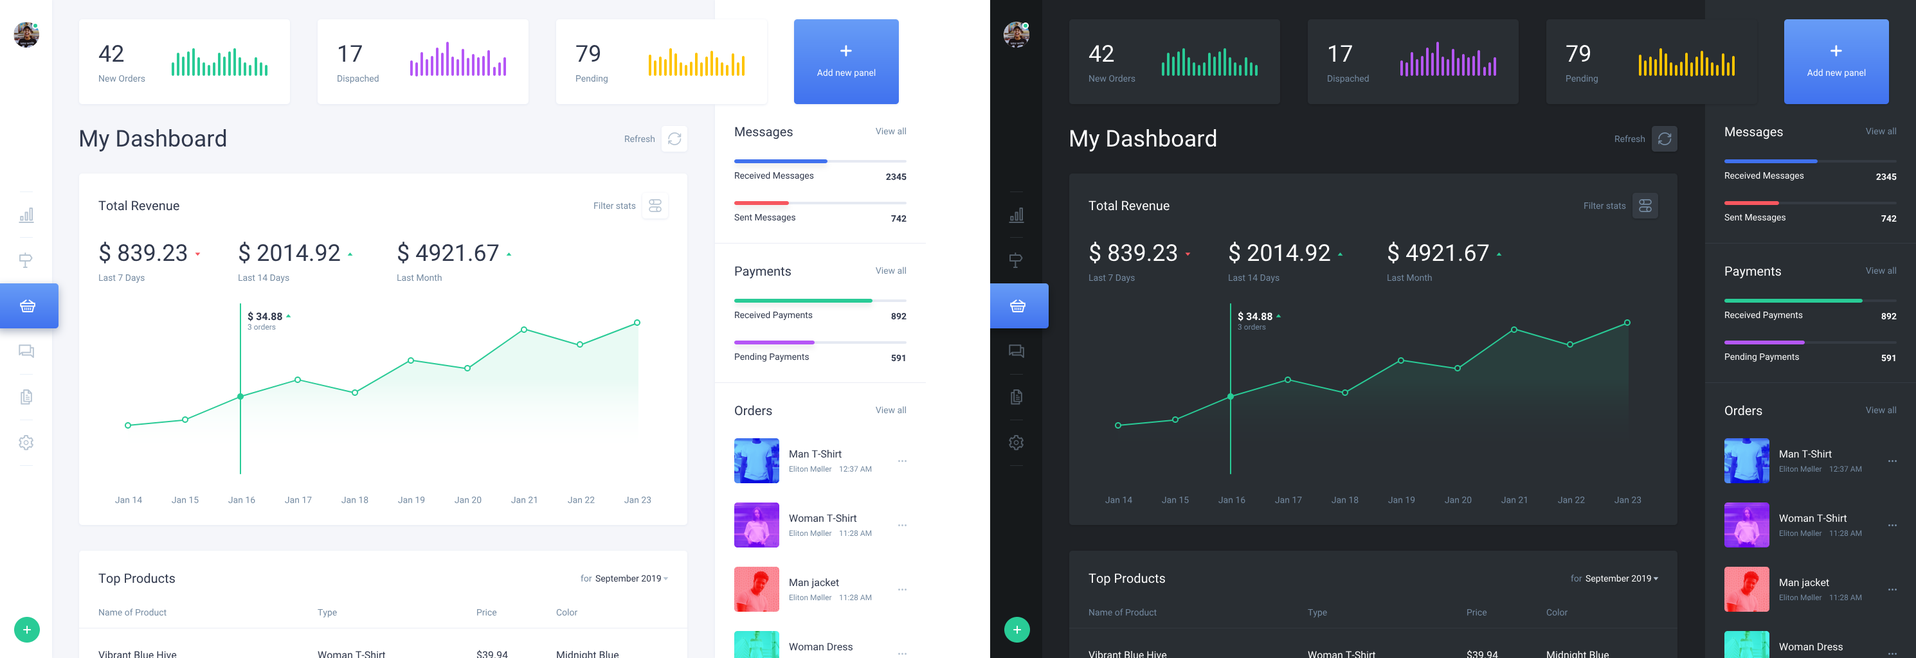
<style>
.page{position:relative;width:1916px;height:658px;background:#ffffff}
.page>*{position:absolute;margin:0}
.t1{font:23.1px "Roboto-Regular";color:#31394d}
.t2{font:23.1px "Roboto-Regular";color:#ffffff}
.t3{font:9px "Roboto-Regular";color:#748aa1}
.t4{font:9px "Roboto-Regular";color:#ffffff}
.t5{font:12.9px "Roboto-Regular";color:#31394d}
.t6{font:12.9px "Roboto-Regular";color:#ffffff}
.t7{font:9px "Roboto-Regular";color:#31394d}
.t8{font:9px "Roboto-Bold";color:#31394d}
.t9{font:9px "Roboto-Bold";color:#ffffff}
.t10{font:10.3px "Roboto-Bold";color:#31394d}
.t11{font:10.3px "Roboto-Bold";color:#ffffff}
.t12{font:7.7px "Roboto-Regular";color:#748aa1}
.t13{font:10.3px "Roboto-Regular";color:#31394d}
.t14{font:10.3px "Roboto-Regular";color:#ffffff}
</style>
<div class="page">
<p class="t1" style="left:98px;top:45px;width:26px;height:17px">42</p>
<p class="t1" style="left:338px;top:45px;width:24px;height:17px">17</p>
<p class="t1" style="left:576px;top:45px;width:24px;height:17px">79</p>
<p class="t2" style="left:1088px;top:45px;width:26px;height:17px">42</p>
<p class="t2" style="left:1328px;top:45px;width:24px;height:17px">17</p>
<p class="t2" style="left:1566px;top:45px;width:24px;height:17px">79</p>
<p class="t3" style="left:99px;top:75px;width:46px;height:7px">New Orders</p>
<p class="t3" style="left:338px;top:75px;width:41px;height:9px">Dispached</p>
<p class="t3" style="left:576px;top:75px;width:32px;height:9px">Pending</p>
<p class="t4" style="left:816px;top:69px;width:60px;height:9px">Add new panel</p>
<p class="t3" style="left:1089px;top:75px;width:46px;height:7px">New Orders</p>
<p class="t3" style="left:1328px;top:75px;width:41px;height:9px">Dispached</p>
<p class="t3" style="left:1566px;top:75px;width:32px;height:9px">Pending</p>
<p class="t4" style="left:1806px;top:69px;width:60px;height:9px">Add new panel</p>
<p class="t1" style="left:80px;top:129px;width:146px;height:23px">My Dashboard</p>
<p class="t3" style="left:625px;top:135px;width:30px;height:8px">Refresh</p>
<p class="t5" style="left:735px;top:127px;width:58px;height:13px">Messages</p>
<p class="t3" style="left:876px;top:127px;width:30px;height:8px">View all</p>
<p class="t2" style="left:1070px;top:129px;width:146px;height:23px">My Dashboard</p>
<p class="t3" style="left:1615px;top:135px;width:30px;height:8px">Refresh</p>
<p class="t6" style="left:1725px;top:127px;width:58px;height:13px">Messages</p>
<p class="t3" style="left:1866px;top:127px;width:30px;height:8px">View all</p>
<p class="t7" style="left:735px;top:172px;width:79px;height:9px">Received Messages</p>
<p class="t8" style="left:886px;top:173px;width:20px;height:8px">2345</p>
<p class="t4" style="left:1725px;top:172px;width:79px;height:9px">Received Messages</p>
<p class="t9" style="left:1876px;top:173px;width:20px;height:8px">2345</p>
<p class="t5" style="left:98px;top:201px;width:81px;height:10px">Total Revenue</p>
<p class="t3" style="left:594px;top:202px;width:42px;height:8px">Filter stats</p>
<p class="t6" style="left:1088px;top:201px;width:81px;height:10px">Total Revenue</p>
<p class="t3" style="left:1584px;top:202px;width:42px;height:8px">Filter stats</p>
<p class="t7" style="left:734px;top:213px;width:61px;height:9px">Sent Messages</p>
<p class="t8" style="left:891px;top:215px;width:15px;height:7px">742</p>
<p class="t4" style="left:1724px;top:213px;width:61px;height:9px">Sent Messages</p>
<p class="t9" style="left:1881px;top:215px;width:15px;height:7px">742</p>
<p class="t1" style="left:99px;top:242px;width:88px;height:22px">$ 839.23</p>
<p class="t1" style="left:239px;top:242px;width:101px;height:22px">$ 2014.92</p>
<p class="t1" style="left:397px;top:242px;width:102px;height:22px">$ 4921.67</p>
<p class="t2" style="left:1089px;top:242px;width:88px;height:22px">$ 839.23</p>
<p class="t2" style="left:1228px;top:242px;width:102px;height:22px">$ 2014.92</p>
<p class="t2" style="left:1387px;top:242px;width:102px;height:22px">$ 4921.67</p>
<p class="t5" style="left:735px;top:266px;width:56px;height:13px">Payments</p>
<p class="t3" style="left:876px;top:267px;width:30px;height:7px">View all</p>
<p class="t6" style="left:1725px;top:266px;width:56px;height:13px">Payments</p>
<p class="t3" style="left:1866px;top:267px;width:30px;height:7px">View all</p>
<p class="t3" style="left:99px;top:274px;width:46px;height:9px">Last 7 Days</p>
<p class="t3" style="left:239px;top:274px;width:50px;height:9px">Last 14 Days</p>
<p class="t3" style="left:397px;top:274px;width:45px;height:8px">Last Month</p>
<p class="t3" style="left:1089px;top:274px;width:46px;height:9px">Last 7 Days</p>
<p class="t3" style="left:1228px;top:274px;width:51px;height:9px">Last 14 Days</p>
<p class="t3" style="left:1387px;top:274px;width:45px;height:8px">Last Month</p>
<p class="t10" style="left:248px;top:311px;width:34px;height:10px">$ 34.88</p>
<p class="t7" style="left:735px;top:311px;width:78px;height:9px">Received Payments</p>
<p class="t8" style="left:891px;top:312px;width:15px;height:8px">892</p>
<p class="t11" style="left:1238px;top:311px;width:34px;height:10px">$ 34.88</p>
<p class="t4" style="left:1725px;top:311px;width:78px;height:9px">Received Payments</p>
<p class="t9" style="left:1881px;top:312px;width:15px;height:8px">892</p>
<p class="t12" style="left:248px;top:324px;width:28px;height:6px">3 orders</p>
<p class="t12" style="left:1238px;top:324px;width:28px;height:6px">3 orders</p>
<p class="t7" style="left:735px;top:353px;width:74px;height:9px">Pending Payments</p>
<p class="t4" style="left:1725px;top:353px;width:74px;height:9px">Pending Payments</p>
<p class="t8" style="left:891px;top:354px;width:14px;height:8px">591</p>
<p class="t9" style="left:1881px;top:354px;width:14px;height:8px">591</p>
<p class="t5" style="left:735px;top:406px;width:37px;height:10px">Orders</p>
<p class="t3" style="left:876px;top:406px;width:30px;height:8px">View all</p>
<p class="t6" style="left:1725px;top:406px;width:37px;height:10px">Orders</p>
<p class="t3" style="left:1866px;top:406px;width:30px;height:8px">View all</p>
<p class="t13" style="left:789px;top:450px;width:53px;height:8px">Man T-Shirt</p>
<p class="t14" style="left:1779px;top:450px;width:53px;height:8px">Man T-Shirt</p>
<p class="t12" style="left:789px;top:466px;width:43px;height:7px">Eliton Møller</p>
<p class="t12" style="left:839px;top:466px;width:33px;height:7px">12:37 AM</p>
<p class="t12" style="left:1779px;top:466px;width:43px;height:7px">Eliton Møller</p>
<p class="t12" style="left:1829px;top:466px;width:33px;height:7px">12:37 AM</p>
<p class="t3" style="left:115px;top:496px;width:27px;height:7px">Jan 14</p>
<p class="t3" style="left:172px;top:496px;width:27px;height:7px">Jan 15</p>
<p class="t3" style="left:228px;top:496px;width:27px;height:7px">Jan 16</p>
<p class="t3" style="left:285px;top:496px;width:27px;height:7px">Jan 17</p>
<p class="t3" style="left:341px;top:496px;width:27px;height:7px">Jan 18</p>
<p class="t3" style="left:398px;top:496px;width:27px;height:7px">Jan 19</p>
<p class="t3" style="left:455px;top:496px;width:27px;height:7px">Jan 20</p>
<p class="t3" style="left:511px;top:496px;width:26px;height:7px">Jan 21</p>
<p class="t3" style="left:568px;top:496px;width:27px;height:7px">Jan 22</p>
<p class="t3" style="left:624px;top:496px;width:27px;height:7px">Jan 23</p>
<p class="t3" style="left:1105px;top:496px;width:27px;height:7px">Jan 14</p>
<p class="t3" style="left:1162px;top:496px;width:27px;height:7px">Jan 15</p>
<p class="t3" style="left:1218px;top:496px;width:27px;height:7px">Jan 16</p>
<p class="t3" style="left:1275px;top:496px;width:27px;height:7px">Jan 17</p>
<p class="t3" style="left:1331px;top:496px;width:27px;height:7px">Jan 18</p>
<p class="t3" style="left:1388px;top:496px;width:27px;height:7px">Jan 19</p>
<p class="t3" style="left:1444px;top:496px;width:28px;height:7px">Jan 20</p>
<p class="t3" style="left:1501px;top:496px;width:26px;height:7px">Jan 21</p>
<p class="t3" style="left:1558px;top:496px;width:27px;height:7px">Jan 22</p>
<p class="t3" style="left:1614px;top:496px;width:27px;height:7px">Jan 23</p>
<p class="t13" style="left:789px;top:514px;width:68px;height:9px">Woman T-Shirt</p>
<p class="t14" style="left:1779px;top:514px;width:68px;height:9px">Woman T-Shirt</p>
<p class="t12" style="left:789px;top:530px;width:43px;height:7px">Eliton Møller</p>
<p class="t12" style="left:839px;top:530px;width:33px;height:7px">11:28 AM</p>
<p class="t12" style="left:1779px;top:530px;width:43px;height:7px">Eliton Møller</p>
<p class="t12" style="left:1829px;top:530px;width:33px;height:7px">11:28 AM</p>
<p class="t5" style="left:98px;top:573px;width:77px;height:13px">Top Products</p>
<p class="t3" style="left:580px;top:575px;width:12px;height:7px">for</p>
<p class="t7" style="left:595px;top:575px;width:66px;height:9px">September 2019</p>
<p class="t13" style="left:789px;top:579px;width:50px;height:10px">Man jacket</p>
<p class="t6" style="left:1088px;top:573px;width:77px;height:13px">Top Products</p>
<p class="t3" style="left:1571px;top:575px;width:11px;height:7px">for</p>
<p class="t4" style="left:1585px;top:575px;width:66px;height:9px">September 2019</p>
<p class="t14" style="left:1779px;top:579px;width:50px;height:10px">Man jacket</p>
<p class="t12" style="left:789px;top:595px;width:43px;height:6px">Eliton Møller</p>
<p class="t12" style="left:839px;top:595px;width:33px;height:6px">11:28 AM</p>
<p class="t12" style="left:1779px;top:595px;width:43px;height:6px">Eliton Møller</p>
<p class="t12" style="left:1829px;top:595px;width:33px;height:6px">11:28 AM</p>
<p class="t3" style="left:99px;top:609px;width:67px;height:7px">Name of Product</p>
<p class="t3" style="left:318px;top:609px;width:19px;height:9px">Type</p>
<p class="t3" style="left:477px;top:609px;width:20px;height:7px">Price</p>
<p class="t3" style="left:556px;top:609px;width:22px;height:7px">Color</p>
<p class="t3" style="left:1089px;top:609px;width:67px;height:7px">Name of Product</p>
<p class="t3" style="left:1308px;top:609px;width:19px;height:9px">Type</p>
<p class="t3" style="left:1467px;top:609px;width:20px;height:7px">Price</p>
<p class="t3" style="left:1546px;top:609px;width:22px;height:7px">Color</p>
<p class="t13" style="left:98px;top:651px;width:79px;height:9px">Vibrant Blue Hive</p>
<p class="t13" style="left:318px;top:651px;width:68px;height:9px">Woman T-Shirt</p>
<p class="t13" style="left:789px;top:643px;width:63px;height:8px">Woman Dress</p>
<p class="t14" style="left:1088px;top:651px;width:79px;height:9px">Vibrant Blue Hive</p>
<p class="t14" style="left:1308px;top:651px;width:68px;height:9px">Woman T-Shirt</p>
<p class="t14" style="left:1779px;top:643px;width:63px;height:8px">Woman Dress</p>
</div>
